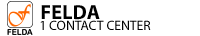
<style>
.page{position:relative;width:200px;height:36px;background:#ffffff}
.page>*{position:absolute;margin:0}
.t1{font:20.5px "MyriadPro-Bold";color:#000000}
.t2{font:13.5px "MyriadPro-Regular";color:#000000}
</style>
<div class="page">
<p class="t1" style="left:41px;top:5px;width:59px;height:15px">FELDA</p>
<p class="t2" style="left:40px;top:20px;width:111px;height:10px">1 CONTACT CENTER</p>
</div>
